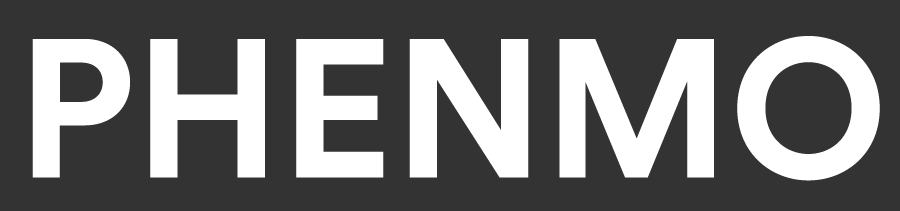
<style>
.page{position:relative;width:900px;height:211px;background:#333333}
.page>*{position:absolute;margin:0}
.t1{font:195.1px "CircularStd-Bold";color:#ffffff;text-transform:uppercase}
</style>
<div class="page">
<p class="t1" style="left:32px;top:36px;width:848px;height:145px">PHENMO</p>
</div>
